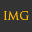
<style>
.page{position:relative;width:32px;height:32px;background:#333333}
.page>*{position:absolute;margin:0}
.t1{font:11px "TrajanPro-Regular";color:#feb900}
</style>
<div class="page">
<p class="t1" style="left:4px;top:11px;width:25px;height:9px">IMG</p>
</div>
